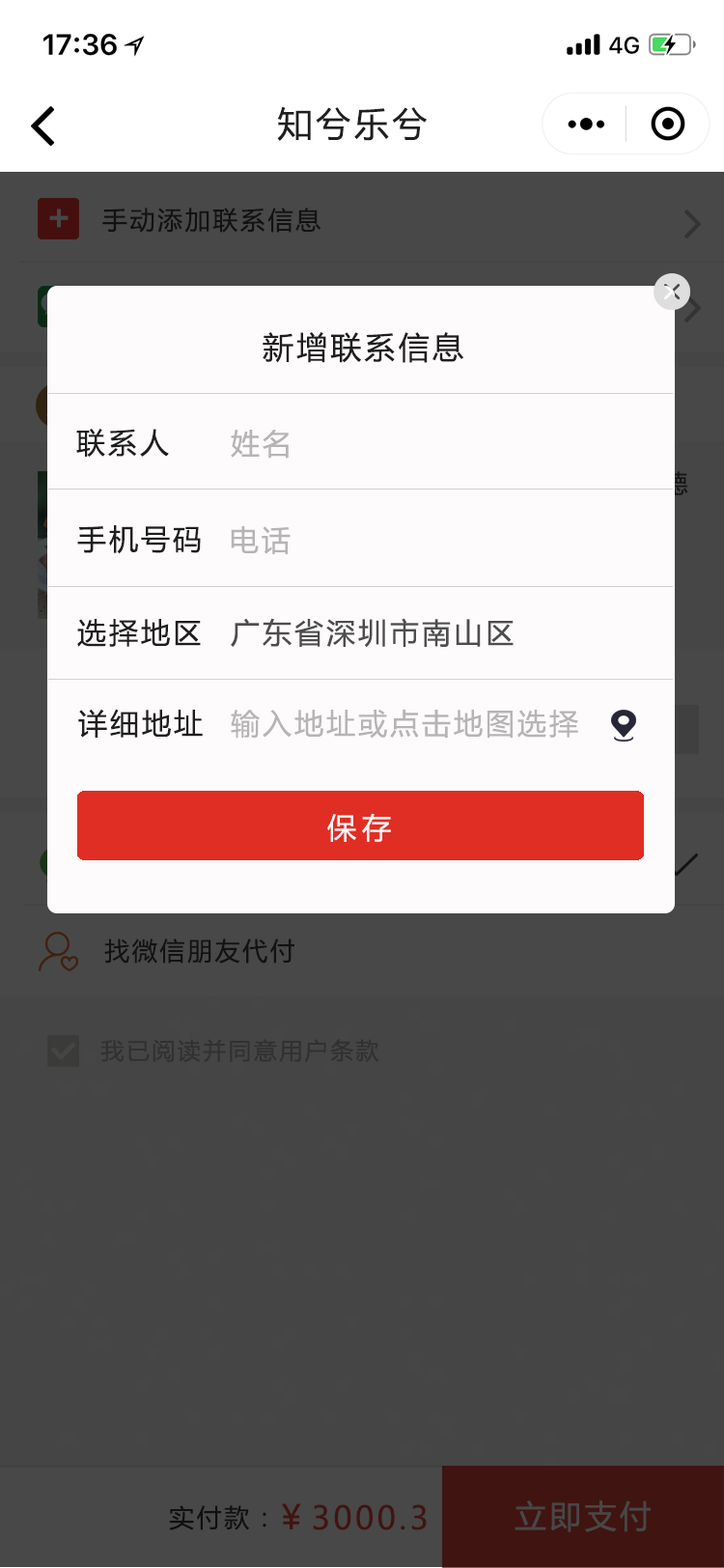
<style>
.page{position:relative;width:724px;height:1568px;background:#454545}
.page>*{position:absolute;margin:0}
.t1{font:34.8px "MicrosoftYaHei";letter-spacing:0.1em;color:#201f20}
.t2{font:34.8px "MicrosoftYaHei-Bold";letter-spacing:0.1em;color:#474747}
.t3{font:25.1px "MicrosoftYaHei";letter-spacing:0.1em;color:#282727}
.t4{font:30.9px "MicrosoftYaHei";letter-spacing:0.1em;color:#1f1e1e}
.t5{font:29px "MicrosoftYaHei";letter-spacing:0.1em;color:#1f1e1e}
.t6{font:29px "MicrosoftYaHei";letter-spacing:0.1em;color:#b6b4b4}
.t7{font:29px "MicrosoftYaHei";letter-spacing:0.1em;color:#4e4d4d}
.t8{font:46.3px "MicrosoftYaHei";letter-spacing:0.1em}
.t9{font:29px "MicrosoftYaHei";letter-spacing:0.2em;color:#fcf8f8}
.t10{font:23.2px "MicrosoftYaHei";letter-spacing:0.1em;color:#313131}
.t11{font:25.1px "MicrosoftYaHei";letter-spacing:0.1em;color:#1e1d1d}
.t12{font:31.9px "MicrosoftYaHei";letter-spacing:0.1em;color:#401411}
.t13{font:33.8px "MicrosoftYaHei";letter-spacing:0.1em;color:#401411}
.t14{font:31.9px "MicrosoftYaHei";letter-spacing:0.1em;color:#484747}
</style>
<div class="page">
<p class="t1" style="left:277px;top:106px;width:150px;height:35px">知兮乐兮</p>
<p class="t2" style="left:49px;top:209px;width:20px;height:19px">+</p>
<p class="t3" style="left:102px;top:208px;width:220px;height:25px">手动添加联系信息</p>
<p class="t4" style="left:263px;top:332px;width:200px;height:31px">新增联系信息</p>
<p class="t5" style="left:76px;top:429px;width:93px;height:28px">联系人</p>
<p class="t6" style="left:231px;top:430px;width:58px;height:29px">姓名</p>
<p class="t5" style="left:77px;top:525px;width:124px;height:29px">手机号码</p>
<p class="t6" style="left:231px;top:526px;width:60px;height:28px">电话</p>
<p class="t7" style="left:231px;top:618px;width:283px;height:30px">广东省深圳市南山区</p>
<p class="t5" style="left:77px;top:619px;width:124px;height:28px">选择地区</p>
<p class="t5" style="left:78px;top:709px;width:125px;height:29px">详细地址</p>
<p class="t6" style="left:231px;top:709px;width:347px;height:30px">输入地址或点击地图选择</p>
<p class="t8" style="left:492px;top:728px;width:15px;height:5px">-</p>
<p class="t9" style="left:327px;top:813px;width:64px;height:29px">保存</p>
<p class="t3" style="left:104px;top:938px;width:190px;height:26px">找微信朋友代付</p>
<p class="t10" style="left:100px;top:1039px;width:279px;height:24px">我已阅读并同意用户条款</p>
<p class="t11" style="left:169px;top:1505px;width:97px;height:25px">实付款：</p>
<p class="t12" style="left:282px;top:1503px;width:145px;height:27px"><span class="t13">￥</span>3000.3</p>
<p class="t14" style="left:515px;top:1500px;width:136px;height:32px">立即支付</p>
</div>
